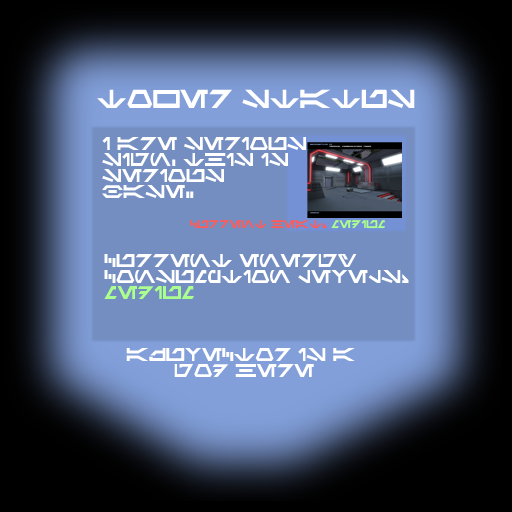
<style>
.page{position:relative;width:512px;height:512px}
.page>*{position:absolute;margin:0}
.t1{font:18.7px "Aurek-Besh";color:#ffffff}
.t2{font:13.3px "Aurek-Besh";color:#ffffff}
.t3{font:8px "Aurek-Besh";color:#ff5b5b}
.t4{font:8px "Aurek-Besh";color:#abff8e}
.t5{font:13.3px "Aurek-Besh";color:#abff8e}
</style>
<div class="page">
<p class="t1" style="left:97px;top:89px;width:318px;height:19px">Tower Status</p>
<p class="t2" style="left:102px;top:137px;width:204px;height:61px">I are serious<br>sign, this is<br>serious <br>base.</p>
<p class="t3" style="left:190px;top:220px;width:195px;height:9px">current heat: <span class="t4">Medium</span></p>
<p class="t2" style="left:104px;top:254px;width:305px;height:45px">Current energy<br>consumption levels:<br><span class="t5">Medium</span></p>
<p class="t2" style="left:126px;top:348px;width:229px;height:29px;text-align:center">Azuvector is a <br>god here</p>
</div>
